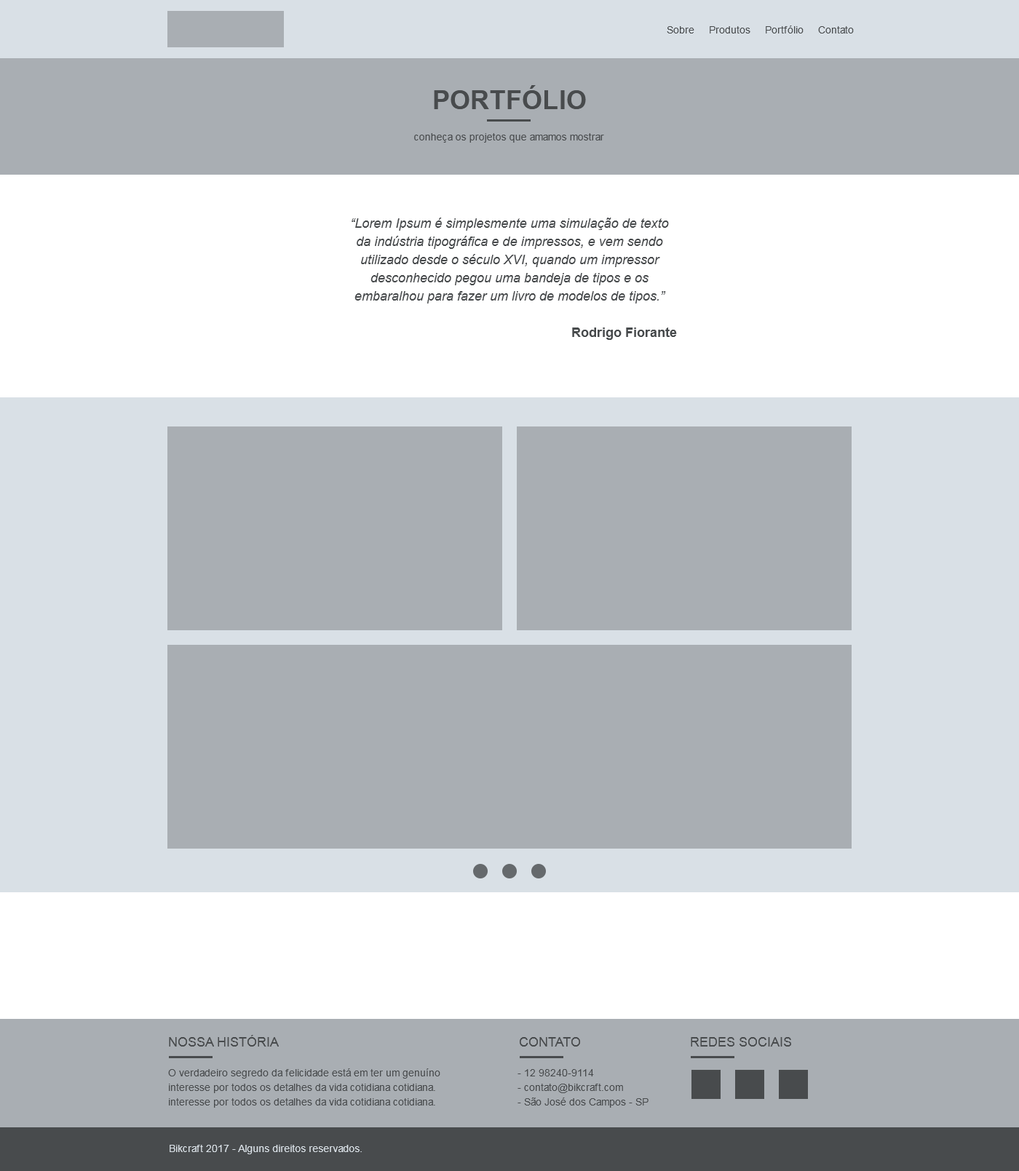
<style>
.page{position:relative;width:1019px;height:1171px;background:#a9aeb3}
.page>*{position:absolute;margin:0}
.t1{font:10.2px "ArialMT";color:#484b4d}
.t2{font:26.2px "Arial-BoldMT";color:#484b4d;text-transform:uppercase}
.t3{font:13.1px/18.2px "Arial-ItalicMT";color:#484b4d}
.t4{font:13.1px/18.2px "Arial-BoldMT";color:#484b4d}
.t5{font:13.1px "ArialMT";color:#484b4d;text-transform:uppercase}
.t6{font:10.2px/14.6px "ArialMT";color:#484b4d}
.t7{font:10.2px "ArialMT";color:#d9e0e6}
</style>
<div class="page">
<p class="t1" style="left:666px;top:25px;width:187px;height:8px">Sobre     Produtos     Portfólio     Contato</p>
<p class="t2" style="left:434px;top:85px;width:152px;height:24px">portfólio</p>
<p class="t1" style="left:414px;top:133px;width:190px;height:10px">conheça os projetos que amamos mostrar</p>
<p class="t3" style="left:351px;top:218px;width:326px;height:122px;text-align:center">“Lorem Ipsum é simplesmente uma simulação de texto da indústria tipográfica e de impressos, e vem sendo utilizado desde o século XVI, quando um impressor desconhecido pegou uma bandeja de tipos e os embaralhou para fazer um livro de modelos de tipos.”<br><br><span class="t4">Rodrigo Fiorante</span></p>
<p class="t5" style="left:169px;top:1035px;width:110px;height:11px">Nossa História</p>
<p class="t5" style="left:519px;top:1037px;width:61px;height:9px">Contato</p>
<p class="t5" style="left:690px;top:1037px;width:101px;height:9px">Redes sociais</p>
<p class="t6" style="left:168px;top:1068px;width:272px;height:39px">O verdadeiro segredo da felicidade está em ter um genuíno interesse por todos os detalhes da vida cotidiana cotidiana.<br>interesse por todos os detalhes da vida cotidiana cotidiana.</p>
<p class="t6" style="left:517px;top:1069px;width:131px;height:38px">- 12 98240-9114<br>- contato@bikcraft.com<br>- São José dos Campos - SP</p>
<p class="t7" style="left:170px;top:1144px;width:192px;height:10px">Bikcraft 2017 - Alguns direitos reservados.</p>
</div>
